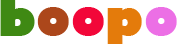
<style>
.page{position:relative;width:177px;height:44px;background:#ffffff}
.page>*{position:absolute;margin:0}
.t1{font:48px "GillSans-UltraBold";color:#3f8913}
.t2{font:48px "GillSans-UltraBold";color:#ac471b}
.t3{font:48px "GillSans-UltraBold";color:#f20739}
.t4{font:48px "GillSans-UltraBold";color:#e47b0b}
.t5{font:48px "GillSans-UltraBold";color:#ec6fe5}
</style>
<div class="page">
<p class="t1" style="left:0px;top:0px;width:177px;height:44px">b<span class="t2">o</span><span class="t3">o</span><span class="t4">p</span><span class="t5">o</span></p>
</div>
